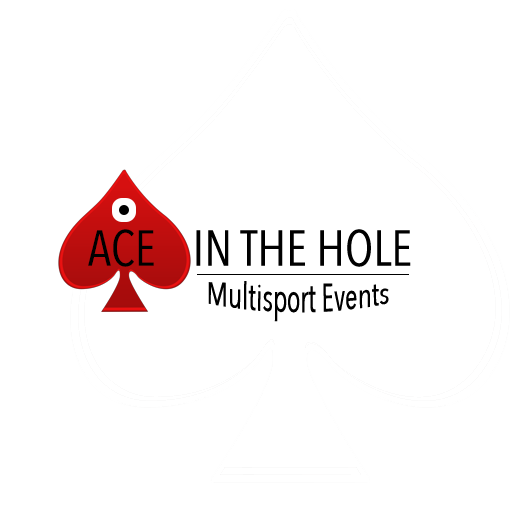
<style>
.page{position:relative;width:512px;height:512px;background:#ffffff}
.page>*{position:absolute;margin:0}
.t1{font:50px "AvenirNextCondensed-Regular";color:#000000}
.t2{font:30px "AvenirNextCondensed-Regular";color:#000000}
</style>
<div class="page">
<p class="t1" style="left:88px;top:229px;width:323px;height:38px">ACE    IN THE HOLE</p>
<p class="t2" style="left:208px;top:281px;width:181px;height:41px">Multisport Events</p>
</div>
